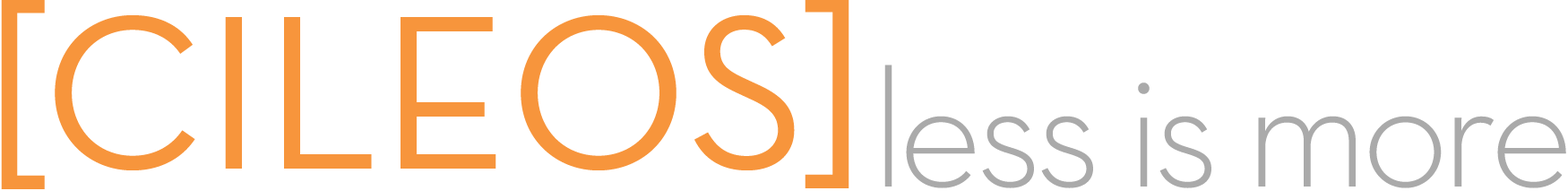
<style>
.page{position:relative;width:1568px;height:191px;background:#ffffff}
.page>*{position:absolute;margin:0}
.t1{font:222.7px "NeutraText-Book";color:#f7953c}
.t2{font:168px "NeutraText-Light";letter-spacing:-0.05em;color:#aaaaaa}
</style>
<div class="page">
<p class="t1" style="left:1px;top:0px;width:44px;height:189px">[</p>
<p class="t1" style="left:805px;top:0px;width:44px;height:188px">]</p>
<p class="t1" style="left:55px;top:15px;width:740px;height:155px">CILEOS</p>
<p class="t2" style="left:884px;top:65px;width:682px;height:123px">less is more</p>
</div>
